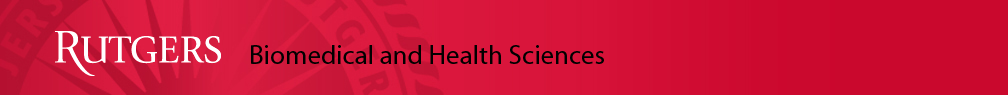
<style>
.page{position:relative;width:1008px;height:95px}
.page>*{position:absolute;margin:0}
.t1{font:27px "MyriadPro-Regular";color:#010000}
</style>
<div class="page">
<p class="t1" style="left:251px;top:45px;width:353px;height:19px">Biomedical and Health Sciences</p>
</div>
